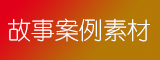
<style>
.page{position:relative;width:160px;height:60px}
.page>*{position:absolute;margin:0}
.t1{font:24px "YouYuan";color:#ffffff}
</style>
<div class="page">
<p class="t1" style="left:8px;top:18px;width:142px;height:24px">故事案例素材</p>
</div>
